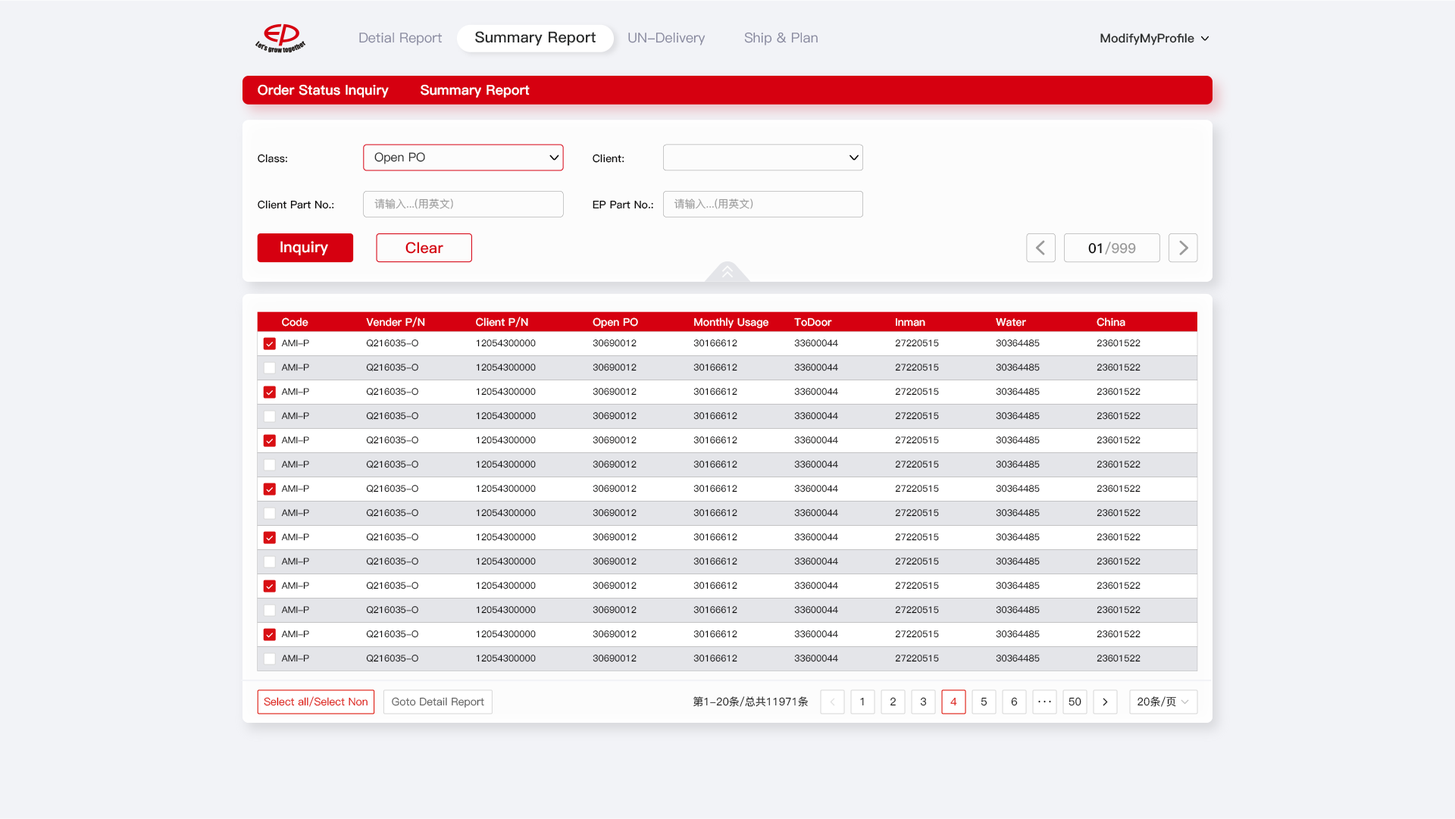
<style>
.page{position:relative;width:1455px;height:819px;background:#f2f3f7}
.page>*{position:absolute;margin:0}
.t1{font:13.6px "PingFang-SC-Medium";color:#87889e}
.t2{font:15.2px "PingFang-SC-Heavy";color:#2b2d2d}
.t3{font:12.1px "PingFang-SC-Heavy";color:#2b2d2d}
.t4{font:13.6px "PingFang-SC-Heavy";color:#ffffff}
.t5{font:10.6px "PingFang-SC-Bold";color:#0b0a0a}
.t6{font:12.1px "PingFang-SC-Medium";color:#2b2d2d}
.t7{font:10.6px "PingFang-SC-Medium";color:#9b9b9b}
.t8{font:15.2px "PingFang-SC-Heavy";color:#ffffff}
.t9{font:15.2px "PingFang-SC-Heavy";color:#d60010}
.t10{font:13.6px "PingFang-SC-Bold";color:#9b9b9b}
.t11{font:13.6px "PingFang-SC-Bold";color:#0b0a0a}
.t12{font:10.6px "PingFang-SC-Bold";color:#ffffff}
.t13{font:9.1px "PingFang-SC-Medium";color:#0b0a0a}
.t14{font:10.6px "PingFang-SC-Medium";color:#dd0e03}
.t15{font:10.6px "PingFang-SC-Medium";color:#606060}
.t16{font:10.6px "PingFang-SC-Medium";color:#1a1a1a}
.t17{font:10.6px "PingFang-SC-Medium"}
</style>
<div class="page">
<p class="t1" style="left:359px;top:33px;width:84px;height:12px">Detial Report</p>
<p class="t2" style="left:475px;top:31px;width:121px;height:14px">Summary Report</p>
<p class="t1" style="left:628px;top:32px;width:78px;height:13px">UN-Delivery</p>
<p class="t1" style="left:744px;top:32px;width:74px;height:13px">Ship &amp; Plan</p>
<p class="t3" style="left:1101px;top:33px;width:94px;height:12px">ModifyMyProfile</p>
<p class="t4" style="left:258px;top:84px;width:272px;height:14px">Order Status Inquiry       Summary Report</p>
<p class="t5" style="left:258px;top:154px;width:29px;height:9px">Class:</p>
<p class="t6" style="left:374px;top:152px;width:51px;height:12px">Open PO</p>
<p class="t5" style="left:593px;top:154px;width:32px;height:9px">Client:</p>
<p class="t5" style="left:258px;top:200px;width:76px;height:9px">Client Part No.:</p>
<p class="t7" style="left:374px;top:199px;width:79px;height:10px">请输入...(用英文)</p>
<p class="t5" style="left:593px;top:200px;width:60px;height:9px">EP Part No.:</p>
<p class="t7" style="left:674px;top:199px;width:79px;height:10px">请输入...(用英文)</p>
<p class="t8" style="left:280px;top:241px;width:48px;height:14px">Inquiry</p>
<p class="t9" style="left:406px;top:242px;width:37px;height:12px">Clear</p>
<p class="t10" style="left:1088px;top:242px;width:48px;height:13px"><span class="t11">01</span>/999</p>
<p class="t12" style="left:282px;top:318px;width:26px;height:9px">Code</p>
<p class="t12" style="left:366px;top:317px;width:59px;height:10px">Vender P/N</p>
<p class="t12" style="left:476px;top:317px;width:52px;height:10px">Client P/N</p>
<p class="t12" style="left:593px;top:318px;width:45px;height:10px">Open PO</p>
<p class="t12" style="left:694px;top:318px;width:75px;height:11px">Monthly Usage</p>
<p class="t12" style="left:794px;top:318px;width:38px;height:9px">ToDoor</p>
<p class="t12" style="left:996px;top:318px;width:30px;height:9px">Water</p>
<p class="t12" style="left:1097px;top:318px;width:29px;height:9px">China</p>
<p class="t12" style="left:896px;top:318px;width:29px;height:9px">Inman</p>
<p class="t13" style="left:281px;top:340px;width:28px;height:7px">AMI-P</p>
<p class="t13" style="left:366px;top:340px;width:52px;height:7px">Q216035-O</p>
<p class="t13" style="left:476px;top:340px;width:60px;height:7px">12054300000</p>
<p class="t13" style="left:593px;top:340px;width:44px;height:7px">30690012</p>
<p class="t13" style="left:694px;top:340px;width:44px;height:7px">30166612</p>
<p class="t13" style="left:794px;top:340px;width:44px;height:7px">33600044</p>
<p class="t13" style="left:895px;top:340px;width:44px;height:7px">27220515</p>
<p class="t13" style="left:996px;top:340px;width:44px;height:7px">30364485</p>
<p class="t13" style="left:1097px;top:340px;width:44px;height:7px">23601522</p>
<p class="t13" style="left:281px;top:364px;width:28px;height:7px">AMI-P</p>
<p class="t13" style="left:366px;top:364px;width:52px;height:7px">Q216035-O</p>
<p class="t13" style="left:476px;top:364px;width:60px;height:7px">12054300000</p>
<p class="t13" style="left:593px;top:364px;width:44px;height:7px">30690012</p>
<p class="t13" style="left:694px;top:364px;width:44px;height:7px">30166612</p>
<p class="t13" style="left:794px;top:364px;width:44px;height:7px">33600044</p>
<p class="t13" style="left:895px;top:364px;width:44px;height:7px">27220515</p>
<p class="t13" style="left:996px;top:364px;width:44px;height:7px">30364485</p>
<p class="t13" style="left:1097px;top:364px;width:44px;height:7px">23601522</p>
<p class="t13" style="left:281px;top:388px;width:28px;height:8px">AMI-P</p>
<p class="t13" style="left:366px;top:388px;width:52px;height:8px">Q216035-O</p>
<p class="t13" style="left:476px;top:388px;width:60px;height:8px">12054300000</p>
<p class="t13" style="left:593px;top:388px;width:44px;height:8px">30690012</p>
<p class="t13" style="left:694px;top:388px;width:44px;height:8px">30166612</p>
<p class="t13" style="left:794px;top:388px;width:44px;height:8px">33600044</p>
<p class="t13" style="left:895px;top:388px;width:44px;height:8px">27220515</p>
<p class="t13" style="left:996px;top:388px;width:44px;height:8px">30364485</p>
<p class="t13" style="left:1097px;top:388px;width:44px;height:8px">23601522</p>
<p class="t13" style="left:281px;top:412px;width:28px;height:8px">AMI-P</p>
<p class="t13" style="left:366px;top:412px;width:52px;height:8px">Q216035-O</p>
<p class="t13" style="left:476px;top:412px;width:60px;height:8px">12054300000</p>
<p class="t13" style="left:593px;top:412px;width:44px;height:8px">30690012</p>
<p class="t13" style="left:694px;top:412px;width:44px;height:8px">30166612</p>
<p class="t13" style="left:794px;top:412px;width:44px;height:8px">33600044</p>
<p class="t13" style="left:895px;top:412px;width:44px;height:8px">27220515</p>
<p class="t13" style="left:996px;top:412px;width:44px;height:8px">30364485</p>
<p class="t13" style="left:1097px;top:412px;width:44px;height:8px">23601522</p>
<p class="t13" style="left:281px;top:437px;width:28px;height:7px">AMI-P</p>
<p class="t13" style="left:366px;top:437px;width:52px;height:7px">Q216035-O</p>
<p class="t13" style="left:476px;top:437px;width:60px;height:7px">12054300000</p>
<p class="t13" style="left:593px;top:437px;width:44px;height:7px">30690012</p>
<p class="t13" style="left:694px;top:437px;width:44px;height:7px">30166612</p>
<p class="t13" style="left:794px;top:437px;width:44px;height:7px">33600044</p>
<p class="t13" style="left:895px;top:437px;width:44px;height:7px">27220515</p>
<p class="t13" style="left:996px;top:437px;width:44px;height:7px">30364485</p>
<p class="t13" style="left:1097px;top:437px;width:44px;height:7px">23601522</p>
<p class="t13" style="left:281px;top:461px;width:28px;height:7px">AMI-P</p>
<p class="t13" style="left:366px;top:461px;width:52px;height:7px">Q216035-O</p>
<p class="t13" style="left:476px;top:461px;width:60px;height:7px">12054300000</p>
<p class="t13" style="left:593px;top:461px;width:44px;height:7px">30690012</p>
<p class="t13" style="left:694px;top:461px;width:44px;height:7px">30166612</p>
<p class="t13" style="left:794px;top:461px;width:44px;height:7px">33600044</p>
<p class="t13" style="left:895px;top:461px;width:44px;height:7px">27220515</p>
<p class="t13" style="left:996px;top:461px;width:44px;height:7px">30364485</p>
<p class="t13" style="left:1097px;top:461px;width:44px;height:7px">23601522</p>
<p class="t13" style="left:281px;top:485px;width:28px;height:8px">AMI-P</p>
<p class="t13" style="left:366px;top:485px;width:52px;height:8px">Q216035-O</p>
<p class="t13" style="left:476px;top:485px;width:60px;height:8px">12054300000</p>
<p class="t13" style="left:593px;top:485px;width:44px;height:8px">30690012</p>
<p class="t13" style="left:694px;top:485px;width:44px;height:8px">30166612</p>
<p class="t13" style="left:794px;top:485px;width:44px;height:8px">33600044</p>
<p class="t13" style="left:895px;top:485px;width:44px;height:8px">27220515</p>
<p class="t13" style="left:996px;top:485px;width:44px;height:8px">30364485</p>
<p class="t13" style="left:1097px;top:485px;width:44px;height:8px">23601522</p>
<p class="t13" style="left:281px;top:509px;width:28px;height:8px">AMI-P</p>
<p class="t13" style="left:366px;top:509px;width:52px;height:8px">Q216035-O</p>
<p class="t13" style="left:476px;top:509px;width:60px;height:8px">12054300000</p>
<p class="t13" style="left:593px;top:509px;width:44px;height:8px">30690012</p>
<p class="t13" style="left:694px;top:509px;width:44px;height:8px">30166612</p>
<p class="t13" style="left:794px;top:509px;width:44px;height:8px">33600044</p>
<p class="t13" style="left:895px;top:509px;width:44px;height:8px">27220515</p>
<p class="t13" style="left:996px;top:509px;width:44px;height:8px">30364485</p>
<p class="t13" style="left:1097px;top:509px;width:44px;height:8px">23601522</p>
<p class="t13" style="left:281px;top:534px;width:28px;height:7px">AMI-P</p>
<p class="t13" style="left:366px;top:534px;width:52px;height:7px">Q216035-O</p>
<p class="t13" style="left:476px;top:534px;width:60px;height:7px">12054300000</p>
<p class="t13" style="left:593px;top:534px;width:44px;height:7px">30690012</p>
<p class="t13" style="left:694px;top:534px;width:44px;height:7px">30166612</p>
<p class="t13" style="left:794px;top:534px;width:44px;height:7px">33600044</p>
<p class="t13" style="left:895px;top:534px;width:44px;height:7px">27220515</p>
<p class="t13" style="left:996px;top:534px;width:44px;height:7px">30364485</p>
<p class="t13" style="left:1097px;top:534px;width:44px;height:7px">23601522</p>
<p class="t13" style="left:281px;top:558px;width:28px;height:7px">AMI-P</p>
<p class="t13" style="left:366px;top:558px;width:52px;height:7px">Q216035-O</p>
<p class="t13" style="left:476px;top:558px;width:60px;height:7px">12054300000</p>
<p class="t13" style="left:593px;top:558px;width:44px;height:7px">30690012</p>
<p class="t13" style="left:694px;top:558px;width:44px;height:7px">30166612</p>
<p class="t13" style="left:794px;top:558px;width:44px;height:7px">33600044</p>
<p class="t13" style="left:895px;top:558px;width:44px;height:7px">27220515</p>
<p class="t13" style="left:996px;top:558px;width:44px;height:7px">30364485</p>
<p class="t13" style="left:1097px;top:558px;width:44px;height:7px">23601522</p>
<p class="t13" style="left:281px;top:582px;width:28px;height:8px">AMI-P</p>
<p class="t13" style="left:366px;top:582px;width:52px;height:8px">Q216035-O</p>
<p class="t13" style="left:476px;top:582px;width:60px;height:8px">12054300000</p>
<p class="t13" style="left:593px;top:582px;width:44px;height:8px">30690012</p>
<p class="t13" style="left:694px;top:582px;width:44px;height:8px">30166612</p>
<p class="t13" style="left:794px;top:582px;width:44px;height:8px">33600044</p>
<p class="t13" style="left:895px;top:582px;width:44px;height:8px">27220515</p>
<p class="t13" style="left:996px;top:582px;width:44px;height:8px">30364485</p>
<p class="t13" style="left:1097px;top:582px;width:44px;height:8px">23601522</p>
<p class="t13" style="left:281px;top:606px;width:28px;height:8px">AMI-P</p>
<p class="t13" style="left:366px;top:606px;width:52px;height:8px">Q216035-O</p>
<p class="t13" style="left:476px;top:606px;width:60px;height:8px">12054300000</p>
<p class="t13" style="left:593px;top:606px;width:44px;height:8px">30690012</p>
<p class="t13" style="left:694px;top:606px;width:44px;height:8px">30166612</p>
<p class="t13" style="left:794px;top:606px;width:44px;height:8px">33600044</p>
<p class="t13" style="left:895px;top:606px;width:44px;height:8px">27220515</p>
<p class="t13" style="left:996px;top:606px;width:44px;height:8px">30364485</p>
<p class="t13" style="left:1097px;top:606px;width:44px;height:8px">23601522</p>
<p class="t13" style="left:281px;top:631px;width:28px;height:7px">AMI-P</p>
<p class="t13" style="left:366px;top:631px;width:52px;height:7px">Q216035-O</p>
<p class="t13" style="left:476px;top:631px;width:60px;height:7px">12054300000</p>
<p class="t13" style="left:593px;top:631px;width:44px;height:7px">30690012</p>
<p class="t13" style="left:694px;top:631px;width:44px;height:7px">30166612</p>
<p class="t13" style="left:794px;top:631px;width:44px;height:7px">33600044</p>
<p class="t13" style="left:895px;top:631px;width:44px;height:7px">27220515</p>
<p class="t13" style="left:996px;top:631px;width:44px;height:7px">30364485</p>
<p class="t13" style="left:1097px;top:631px;width:44px;height:7px">23601522</p>
<p class="t13" style="left:281px;top:655px;width:28px;height:7px">AMI-P</p>
<p class="t13" style="left:366px;top:655px;width:52px;height:7px">Q216035-O</p>
<p class="t13" style="left:476px;top:655px;width:60px;height:7px">12054300000</p>
<p class="t13" style="left:593px;top:655px;width:44px;height:7px">30690012</p>
<p class="t13" style="left:694px;top:655px;width:44px;height:7px">30166612</p>
<p class="t13" style="left:794px;top:655px;width:44px;height:7px">33600044</p>
<p class="t13" style="left:895px;top:655px;width:44px;height:7px">27220515</p>
<p class="t13" style="left:996px;top:655px;width:44px;height:7px">30364485</p>
<p class="t13" style="left:1097px;top:655px;width:44px;height:7px">23601522</p>
<p class="t14" style="left:264px;top:697px;width:104px;height:10px">Select all/Select Non</p>
<p class="t15" style="left:392px;top:697px;width:92px;height:11px">Goto Detail Report</p>
<p class="t16" style="left:694px;top:697px;width:115px;height:10px">第1-20条/总共11971条</p>
<p class="t17" style="left:860px;top:697px;width:4px;height:9px">1</p>
<p class="t16" style="left:891px;top:697px;width:5px;height:9px">2</p>
<p class="t17" style="left:920px;top:697px;width:7px;height:9px">3</p>
<p class="t17" style="left:950px;top:697px;width:7px;height:9px">4</p>
<p class="t16" style="left:981px;top:697px;width:7px;height:9px">5</p>
<p class="t16" style="left:1011px;top:697px;width:7px;height:9px">6</p>
<p class="t16" style="left:1038px;top:700px;width:13px;height:3px">···</p>
<p class="t16" style="left:1069px;top:697px;width:13px;height:9px">50</p>
<p class="t16" style="left:1138px;top:697px;width:38px;height:10px">20条/页</p>
</div>
